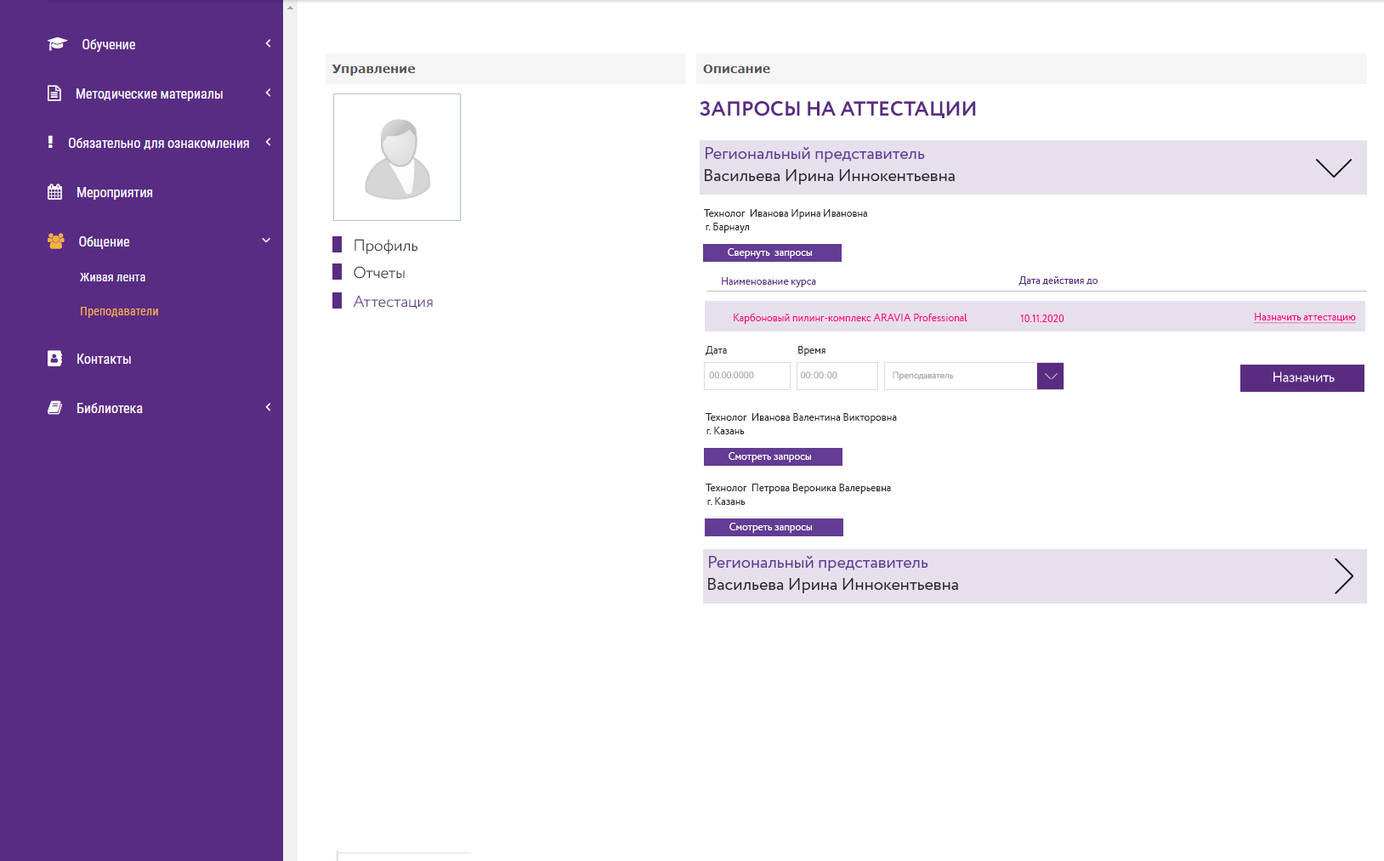
<style>
.page{position:relative;width:1384px;height:861px;background:#ffffff}
.page>*{position:absolute;margin:0}
.t1{font:20.4px "Circe-Bold";color:#592c82;text-transform:uppercase}
.t2{font:17px "Circe-Regular";color:#633c94}
.t3{font:17px "Circe-Regular";color:#272727}
.t4{font:10.2px "Circe-Regular";color:#272727}
.t5{font:15.9px "Circe-Light";color:#272727}
.t6{font:10.2px "Circe-Regular";color:#ffffff}
.t7{font:10.2px "Circe-Regular";color:#592c81}
.t8{font:15.9px "Circe-Light";color:#592c82}
.t9{font:10.2px "Circe-Regular";color:#ff0081}
.t10{font:10.2px "Circe-Regular";color:#ff0081;text-decoration:underline}
.t11{font:9.1px "Circe-Light";color:#a3a3a3}
.t12{font:13.6px "Circe-Light";color:#ffffff}
</style>
<div class="page">
<p class="t1" style="left:700px;top:101px;width:276px;height:17px">запросы на аттестации</p>
<p class="t2" style="left:706px;top:147px;width:219px;height:15px">Региональный представитель</p>
<p class="t3" style="left:705px;top:169px;width:250px;height:16px">Васильева Ирина Иннокентьевна</p>
<p class="t4" style="left:704px;top:209px;width:163px;height:10px">Технолог  Иванова Ирина Ивановна</p>
<p class="t4" style="left:706px;top:223px;width:44px;height:10px">г. Барнаул</p>
<p class="t5" style="left:355px;top:239px;width:63px;height:15px">Профиль</p>
<p class="t6" style="left:728px;top:248px;width:84px;height:10px">Свернуть  запросы</p>
<p class="t5" style="left:354px;top:266px;width:51px;height:13px">Отчеты</p>
<p class="t7" style="left:722px;top:277px;width:94px;height:10px">Наименование курса</p>
<p class="t7" style="left:1019px;top:276px;width:80px;height:10px">Дата действия до</p>
<p class="t8" style="left:353px;top:295px;width:80px;height:15px">Аттестация</p>
<p class="t9" style="left:734px;top:313px;width:234px;height:11px">Карбоновый пилинг-комплекс ARAVIA Professional</p>
<p class="t9" style="left:1020px;top:315px;width:45px;height:7px">10.11.2020</p>
<p class="t10" style="left:1254px;top:313px;width:102px;height:11px">Назначить аттестацию</p>
<p class="t4" style="left:706px;top:346px;width:21px;height:9px">Дата</p>
<p class="t4" style="left:798px;top:346px;width:28px;height:10px">Время</p>
<p class="t11" style="left:709px;top:372px;width:45px;height:7px">00.00.0000</p>
<p class="t11" style="left:801px;top:372px;width:37px;height:7px">00:00:00</p>
<p class="t11" style="left:893px;top:372px;width:61px;height:9px">Преподаватель</p>
<p class="t12" style="left:1274px;top:372px;width:61px;height:11px">Назначить</p>
<p class="t4" style="left:706px;top:413px;width:191px;height:10px">Технолог  Иванова Валентина Викторовна</p>
<p class="t4" style="left:707px;top:427px;width:38px;height:8px">г. Казань</p>
<p class="t6" style="left:729px;top:452px;width:82px;height:11px">Смотреть запросы</p>
<p class="t4" style="left:706px;top:484px;width:185px;height:10px">Технолог  Петрова Вероника Валерьевна</p>
<p class="t4" style="left:707px;top:497px;width:39px;height:8px">г. Казань</p>
<p class="t6" style="left:730px;top:523px;width:82px;height:10px">Смотреть запросы</p>
<p class="t2" style="left:709px;top:556px;width:220px;height:15px">Региональный представитель</p>
<p class="t3" style="left:708px;top:578px;width:250px;height:16px">Васильева Ирина Иннокентьевна</p>
</div>
